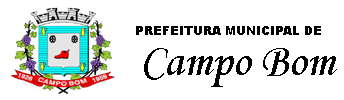
<style>
.page{position:relative;width:344px;height:100px;background:#ffffff}
.page>*{position:absolute;margin:0}
.t1{font:11.2px "Arial-Black";color:#000000}
.t2{font:45.8px "MonotypeCorsiva";color:#000000}
</style>
<div class="page">
<p class="t1" style="left:136px;top:26px;width:185px;height:9px">PREFEITURA MUNICIPAL DE</p>
<p class="t2" style="left:144px;top:48px;width:193px;height:39px">Campo Bom</p>
</div>
